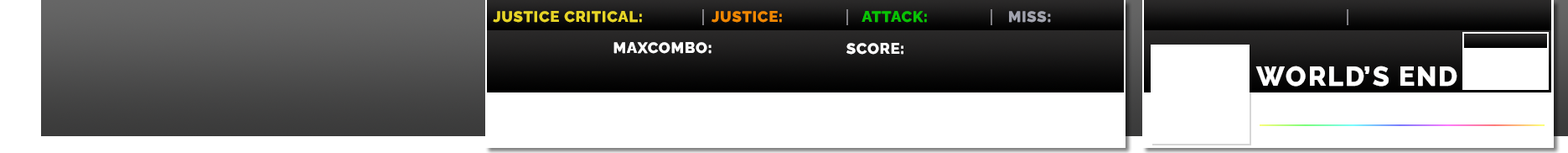
<style>
.page{position:relative;width:1568px;height:153px;background:#ffffff}
.page>*{position:absolute;margin:0}
.t1{font:14.9px "RalewayRoman-ExtraBold";letter-spacing:0.06em;color:#e7d527}
.t2{font:14.9px "RalewayRoman-ExtraBold";letter-spacing:0.06em;color:#ef8702}
.t3{font:14.9px "RalewayRoman-ExtraBold";letter-spacing:0.06em;color:#08c304}
.t4{font:14.9px "RalewayRoman-ExtraBold";letter-spacing:0.06em;color:#a1a3ae}
.t5{font:14.9px "RalewayRoman-ExtraBold";letter-spacing:0.06em;color:#ffffff}
.t6{font:26.9px "RalewayRoman-ExtraBold";letter-spacing:0.06em;color:#ffffff}
</style>
<div class="page">
<p class="t1" style="left:493px;top:11px;width:149px;height:12px">JUSTICE CRITICAL:</p>
<p class="t2" style="left:712px;top:11px;width:70px;height:12px">JUSTICE:</p>
<p class="t3" style="left:862px;top:11px;width:65px;height:12px">ATTACK:</p>
<p class="t4" style="left:1009px;top:11px;width:42px;height:12px">MISS:</p>
<p class="t5" style="left:613px;top:42px;width:99px;height:12px">MAXCOMBO:</p>
<p class="t5" style="left:846px;top:43px;width:57px;height:11px">SCORE:</p>
<p class="t6" style="left:1255px;top:65px;width:202px;height:21px">WORLD’S END</p>
</div>
